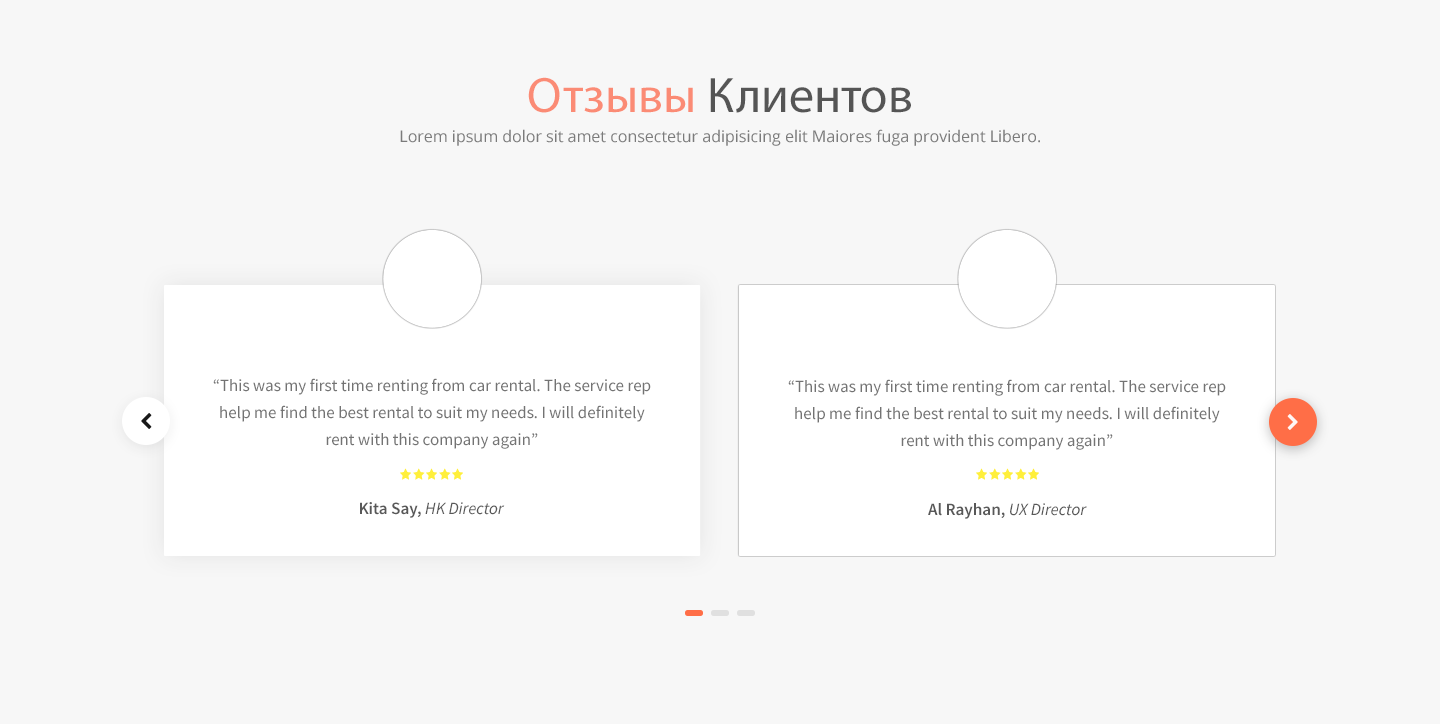
<style>
.page{position:relative;width:1440px;height:724px;background:#f7f7f7}
.page>*{position:absolute;margin:0}
.t1{font:50px "MyriadPro-Regular"}
.t2{font:16px "OpenSans";color:#7b7b7b}
.t3{font:17px/27px "SourceSansPro-Regular";color:#737373}
.t4{font:17px "SourceSansPro-It";color:#585858}
.t5{font:17px "SourceSansPro-Semibold";color:#585858}
</style>
<div class="page">
<p class="t1" style="left:528px;top:77px;width:383px;height:36px">Отзывы Клиентов</p>
<p class="t2" style="left:400px;top:129px;width:640px;height:17px">Lorem ipsum dolor sit amet consectetur adipisicing elit Maiores fuga provident Libero.</p>
<p class="t3" style="left:213px;top:378px;width:438px;height:71px;text-align:center">“This was my first time renting from car rental. The service rep help me find the best rental to suit my needs. I will definitely rent with this company again”</p>
<p class="t3" style="left:788px;top:379px;width:438px;height:71px;text-align:center">“This was my first time renting from car rental. The service rep help me find the best rental to suit my needs. I will definitely rent with this company again”</p>
<p class="t4" style="left:360px;top:502px;width:145px;height:16px"><span class="t5">Kita Say, </span>HK Director</p>
<p class="t4" style="left:928px;top:503px;width:159px;height:16px"><span class="t5">Al Rayhan, </span>UX Director</p>
</div>
